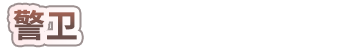
<style>
.page{position:relative;width:360px;height:50px;background:#ffffff}
.page>*{position:absolute;margin:0}
.t1{font:32px "SourceHanSansSC-Bold";font-weight:bold}
</style>
<div class="page">
<p class="t1" style="left:13px;top:9px;width:64px;height:32px">警卫</p>
</div>
